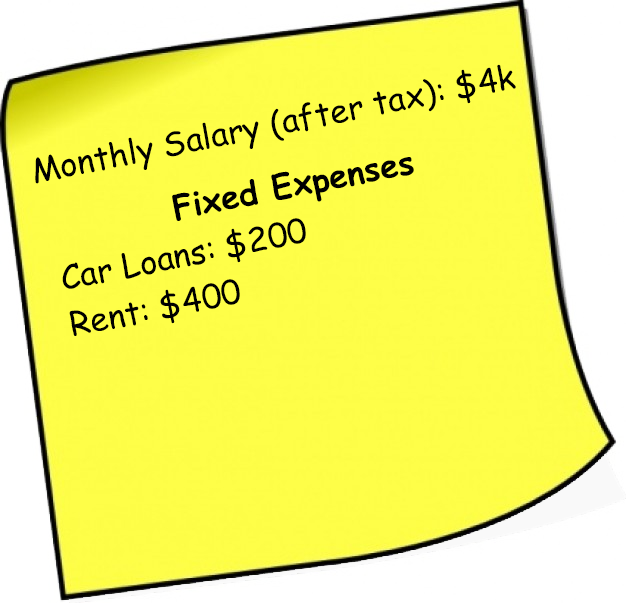
<style>
.page{position:relative;width:626px;height:603px;background:#fefe48}
.page>*{position:absolute;margin:0}
.t1{font:33px "ComicSansMS";color:#000000}
.t2{font:33px "ComicSansMS-Bold";color:#000000}
</style>
<div class="page">
<p class="t1" style="left:35px;top:64px;width:481px;height:120px;rotate:-11deg">Monthly Salary (after tax): $4k</p>
<p class="t1" style="left:62px;top:157px;width:352px;height:179px;text-align:center;rotate:-11deg"><span class="t2">Fixed Expenses<br></span>Car Loans: $200<br>Rent: $400</p>
</div>
